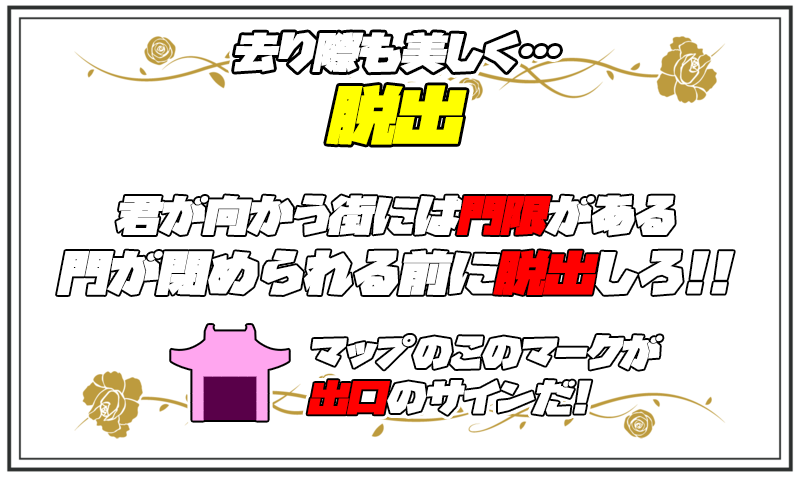
<style>
.page{position:relative;width:800px;height:478px;background:#ffffff}
.page>*{position:absolute;margin:0}
.t1{font:40px "GN-KMBFont-UB-OldstyleKana";color:#ffffff;font-style:italic;scale:1.1 1}
.t2{font:60px "GN-KMBFont-UB-OldstyleKana";color:#ffff00;font-style:italic;scale:1.1 1}
.t3{font:45px/55px "GN-KMBFont-UB-OldstyleKana";color:#ffffff;font-style:italic;scale:1.1 1}
.t4{font:40px/55px "GN-KMBFont-UB-OldstyleKana";color:#ffffff;font-style:italic;scale:1.1 1}
.t5{font:40px/55px "GN-KMBFont-UB-OldstyleKana";color:#ff0000;font-style:italic;scale:1.1 1}
.t6{font:45px/55px "GN-KMBFont-UB-OldstyleKana";color:#ff0000;font-style:italic;scale:1.1 1}
.t7{font:35px/45px "GN-KMBFont-UB-OldstyleKana";color:#ffffff;font-style:italic;scale:1.1 1}
.t8{font:35px/45px "GN-KMBFont-UB-OldstyleKana";color:#ff0000;font-style:italic;scale:1.1 1}
</style>
<div class="page">
<p class="t1" style="left:234px;top:32px;width:326px;height:41px">去り際も美しく…</p>
<p class="t2" style="left:326px;top:85px;width:141px;height:60px">脱出</p>
<p class="t3" style="left:57px;top:195px;width:677px;height:100px;text-align:center"><span class="t4">君が向かう街には</span><span class="t5">門限</span><span class="t4">がある<br></span>門が閉められる前に<span class="t6">脱出</span>しろ!!</p>
<p class="t7" style="left:307px;top:335px;width:356px;height:80px">マップのこのマークが<br><span class="t8">出口</span>のサインだ!</p>
</div>
